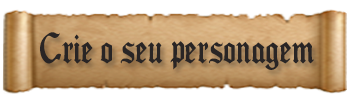
<style>
.page{position:relative;width:350px;height:100px;background:#ffffff}
.page>*{position:absolute;margin:0}
.t1{font:36.6px "Seagramtfb";color:#292525;scale:0.81 1}
</style>
<div class="page">
<p class="t1" style="left:40px;top:32px;width:274px;height:38px">Crie o seu personagem</p>
</div>
